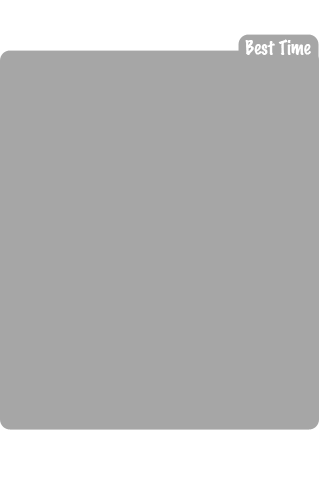
<style>
.page{position:relative;width:320px;height:480px;background:#a6a6a6}
.page>*{position:absolute;margin:0}
.t1{font:18px "MarkerFelt-Thin";color:#ffffff}
</style>
<div class="page">
<p class="t1" style="left:245px;top:39px;width:66px;height:16px">Best Time</p>
</div>
